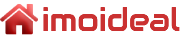
<style>
.page{position:relative;width:180px;height:38px;background:#ffffff}
.page>*{position:absolute;margin:0}
.t1{font:31.6px "Audiowide-Regular";color:#ca3131}
</style>
<div class="page">
<p class="t1" style="left:43px;top:7px;width:137px;height:24px">imoideal</p>
</div>
